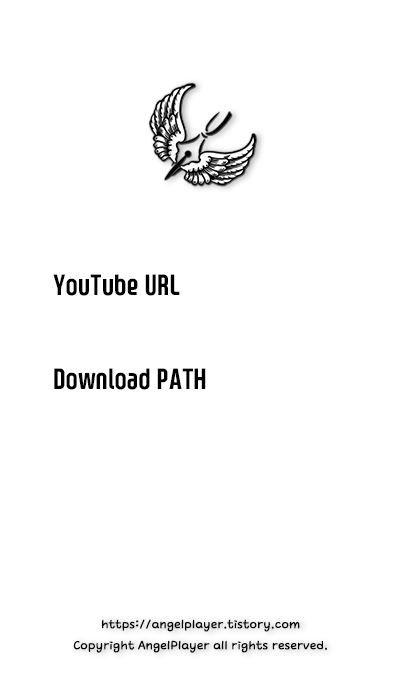
<style>
.page{position:relative;width:400px;height:690px;background:#ffffff}
.page>*{position:absolute;margin:0}
.t1{font:29.1px "SwaggerTTF";color:#000000}
.t2{font:13.2px/21.1px "Cafe24Dongdong";color:#000000}
</style>
<div class="page">
<p class="t1" style="left:53px;top:274px;width:127px;height:22px">YouTube URL</p>
<p class="t1" style="left:54px;top:368px;width:152px;height:22px">Download PATH</p>
<p class="t2" style="left:73px;top:619px;width:254px;height:34px;text-align:center">https://angelplayer.tistory.com<br>Copyright AngelPlayer all rights reserved.</p>
</div>
